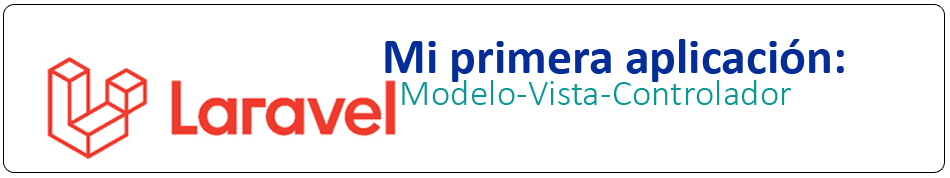
<style>
.page{position:relative;width:950px;height:178px;background:#ffffff}
.page>*{position:absolute;margin:0}
.t1{font:50px "Calibri-Bold";color:#042d98}
.t2{font:37.5px "Calibri-Light";color:#089792}
</style>
<div class="page">
<p class="t1" style="left:385px;top:39px;width:459px;height:43px">Mi primera aplicación:</p>
<p class="t2" style="left:402px;top:80px;width:389px;height:25px">Modelo-Vista-Controlador</p>
</div>
